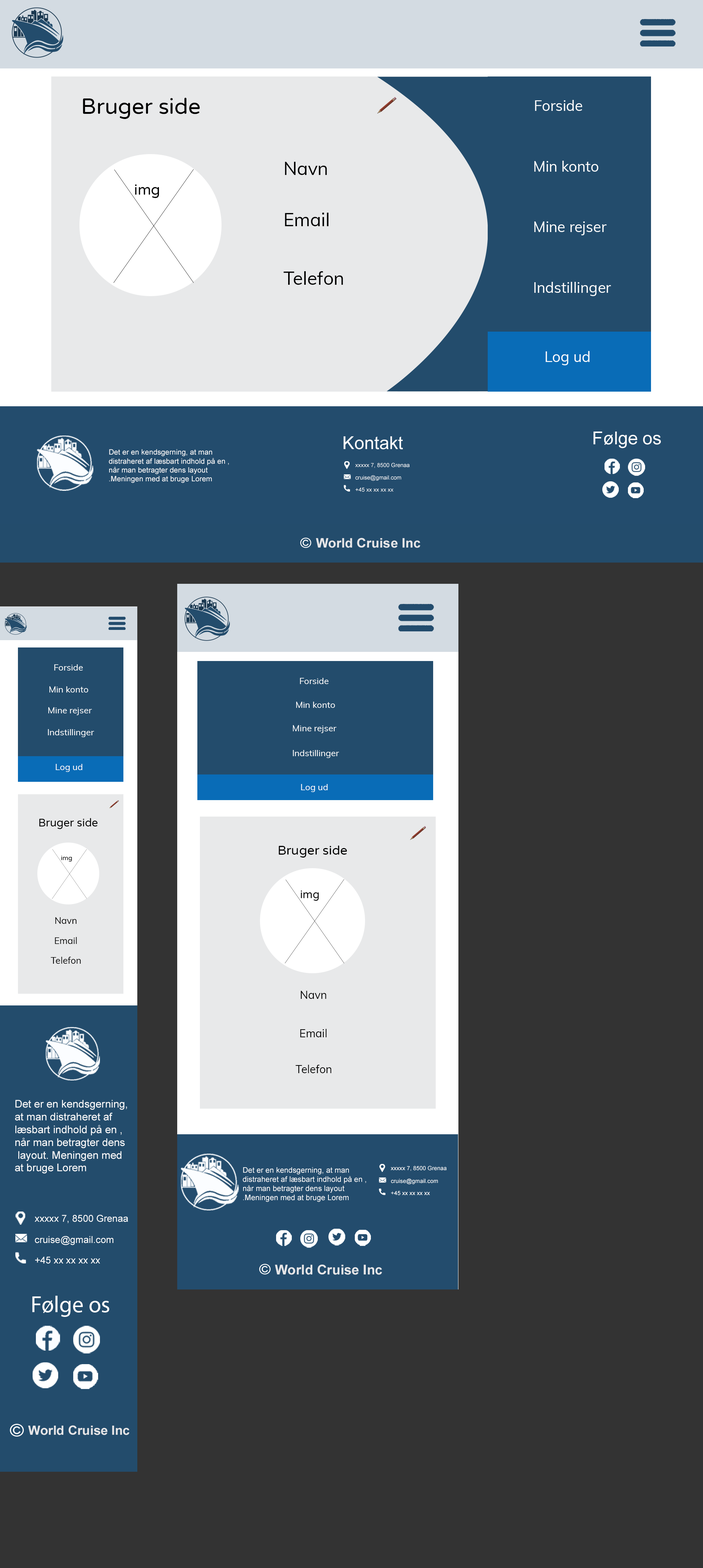
<style>
.page{position:relative;width:703px;height:1568px;background:#333333}
.page>*{position:absolute;margin:0}
.t1{font:22px "VarelaRound-Regular";color:#000000}
.t2{font:14.6px "Muli-Regular";color:#ffffff}
.t3{font:18.3px "Muli-Regular";color:#000000}
.t4{font:14.6px "VarelaRound-Regular";color:#000000}
.t5{font:17.8px "ArialMT";color:#ffffff}
.t6{font:7.4px "ArialMT";color:#ffffff}
.t7{font:5.6px "ArialMT";color:#ffffff}
.t8{font:13.2px "Arial-BoldMT";color:#e6e6e8}
.t9{font:8.8px "Muli-Regular";color:#ffffff}
.t10{font:11px "VarelaRound-Regular";color:#000000}
.t11{font:12.8px "VarelaRound-Regular";color:#000000}
.t12{font:6.4px "VarelaRound-Regular";color:#000000}
.t13{font:10.8px "VarelaRound-Regular";color:#000000}
.t14{font:9.2px "Muli-Regular";color:#000000}
.t15{font:11px "Muli-Regular";color:#000000}
.t16{font:10.6px "ArialMT";color:#ffffff}
.t17{font:7.6px "ArialMT";color:#ffffff}
.t18{font:5.8px "ArialMT";color:#ffffff}
.t19{font:9.6px "ArialMT";color:#ffffff}
.t20{font:13.6px "Arial-BoldMT";color:#e6e6e8}
.t21{font:23px "MyriadPro-Regular";color:#ffffff}
.t22{font:12.8px "Arial-BoldMT";color:#e6e6e8}
</style>
<div class="page">
<p class="t1" style="left:83px;top:98px;width:117px;height:21px">Bruger side</p>
<p class="t2" style="left:535px;top:100px;width:47px;height:11px">Forside</p>
<p class="t3" style="left:285px;top:162px;width:42px;height:13px">Navn</p>
<p class="t2" style="left:534px;top:161px;width:64px;height:11px">Min konto</p>
<p class="t4" style="left:135px;top:184px;width:24px;height:14px">img</p>
<p class="t3" style="left:285px;top:213px;width:43px;height:13px">Email</p>
<p class="t2" style="left:534px;top:221px;width:72px;height:14px">Mine rejser</p>
<p class="t3" style="left:283px;top:271px;width:60px;height:14px">Telefon</p>
<p class="t2" style="left:534px;top:282px;width:77px;height:14px">Indstillinger</p>
<p class="t2" style="left:545px;top:351px;width:44px;height:14px">Log ud</p>
<p class="t5" style="left:343px;top:436px;width:60px;height:13px">Kontakt</p>
<p class="t5" style="left:593px;top:432px;width:68px;height:16px">Følge os</p>
<p class="t6" style="left:109px;top:449px;width:120px;height:34px">Det er en kendsgerning, at man <br>distraheret af læsbart indhold på en ,<br>når man betragter dens layout<br>.Meningen med at bruge Lorem</p>
<p class="t7" style="left:355px;top:463px;width:55px;height:5px">xxxxx 7, 8500 Grenaa</p>
<p class="t7" style="left:355px;top:475px;width:46px;height:6px">cruise@gmail.com</p>
<p class="t7" style="left:355px;top:488px;width:38px;height:4px">+45 xx xx xx xx</p>
<p class="t8" style="left:316px;top:538px;width:104px;height:10px">World Cruise Inc</p>
<p class="t9" style="left:54px;top:664px;width:29px;height:7px">Forside</p>
<p class="t9" style="left:300px;top:678px;width:29px;height:6px">Forside</p>
<p class="t9" style="left:49px;top:686px;width:39px;height:6px">Min konto</p>
<p class="t9" style="left:296px;top:702px;width:39px;height:6px">Min konto</p>
<p class="t9" style="left:48px;top:707px;width:44px;height:8px">Mine rejser</p>
<p class="t9" style="left:293px;top:725px;width:43px;height:8px">Mine rejser</p>
<p class="t9" style="left:48px;top:729px;width:46px;height:8px">Indstillinger</p>
<p class="t9" style="left:293px;top:750px;width:46px;height:8px">Indstillinger</p>
<p class="t9" style="left:56px;top:764px;width:26px;height:8px">Log ud</p>
<p class="t9" style="left:301px;top:784px;width:27px;height:8px">Log ud</p>
<p class="t10" style="left:39px;top:818px;width:59px;height:11px">Bruger side</p>
<p class="t11" style="left:279px;top:845px;width:68px;height:13px">Bruger side</p>
<p class="t12" style="left:61px;top:856px;width:11px;height:6px">img</p>
<p class="t13" style="left:300px;top:891px;width:19px;height:10px">img</p>
<p class="t14" style="left:55px;top:917px;width:21px;height:7px">Navn</p>
<p class="t14" style="left:55px;top:937px;width:22px;height:7px">Email</p>
<p class="t14" style="left:51px;top:957px;width:30px;height:7px">Telefon</p>
<p class="t15" style="left:300px;top:991px;width:26px;height:8px">Navn</p>
<p class="t15" style="left:300px;top:1029px;width:26px;height:8px">Email</p>
<p class="t15" style="left:295px;top:1065px;width:36px;height:8px">Telefon</p>
<p class="t16" style="left:15px;top:1100px;width:112px;height:73px">Det er en kendsgerning, <br>at man distraheret af <br>læsbart indhold på en ,<br>når man betragter dens<br> layout. Meningen med <br>at bruge Lorem</p>
<p class="t17" style="left:243px;top:1167px;width:123px;height:35px">Det er en kendsgerning, at man <br>distraheret af læsbart indhold på en ,<br>når man betragter dens layout<br>.Meningen med at bruge Lorem</p>
<p class="t18" style="left:391px;top:1166px;width:56px;height:5px">xxxxx 7, 8500 Grenaa</p>
<p class="t18" style="left:391px;top:1179px;width:47px;height:5px">cruise@gmail.com</p>
<p class="t18" style="left:391px;top:1191px;width:39px;height:4px">+45 xx xx xx xx</p>
<p class="t19" style="left:34px;top:1215px;width:94px;height:8px">xxxxx 7, 8500 Grenaa</p>
<p class="t19" style="left:35px;top:1236px;width:78px;height:9px">cruise@gmail.com</p>
<p class="t19" style="left:35px;top:1257px;width:65px;height:7px">+45 xx xx xx xx</p>
<p class="t20" style="left:275px;top:1265px;width:107px;height:10px">World Cruise Inc</p>
<p class="t21" style="left:32px;top:1296px;width:77px;height:21px">Følge os</p>
<p class="t22" style="left:28px;top:1425px;width:102px;height:10px">World Cruise Inc</p>
</div>
